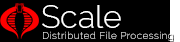
<style>
.page{position:relative;width:180px;height:42px;background:#000000}
.page>*{position:absolute;margin:0}
.t1{font:32px "Raleway-Light";color:#ffffff}
.t2{font:10px "Raleway-Light";letter-spacing:0.04em}
</style>
<div class="page">
<p class="t1" style="left:42px;top:5px;width:79px;height:23px">Scale</p>
<p class="t2" style="left:43px;top:31px;width:130px;height:10px">Distributed File Processing</p>
</div>
